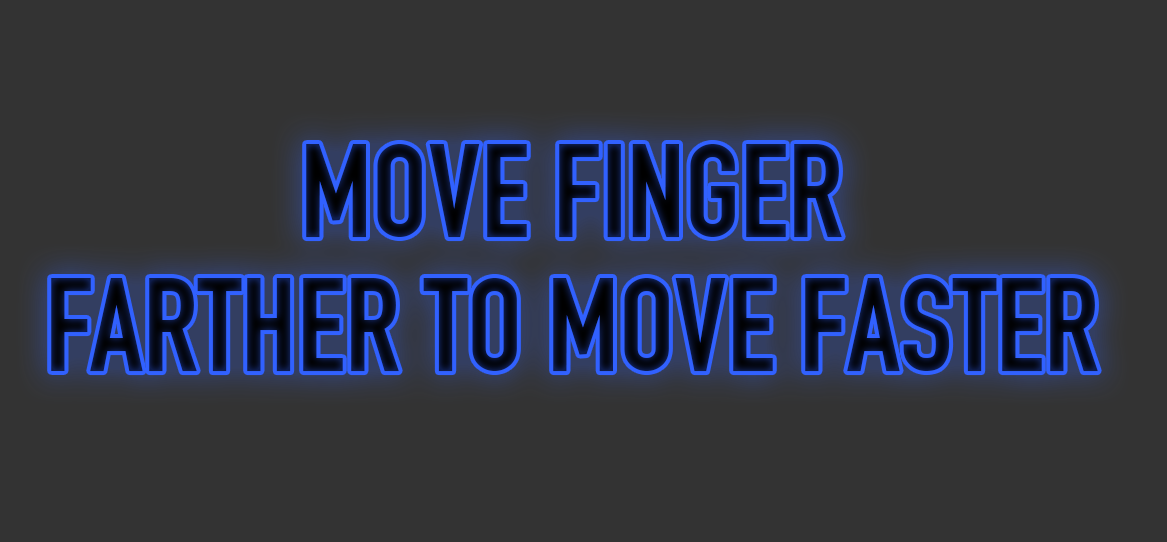
<style>
.page{position:relative;width:1167px;height:542px;background:#333333}
.page>*{position:absolute;margin:0}
.t1{font:129.9px/134.8px "DINEngschrift";color:#060c20;text-transform:uppercase}
</style>
<div class="page">
<p class="t1" style="left:51px;top:144px;width:1047px;height:228px;text-align:center">Move Finger <br>farther to move faster</p>
</div>
